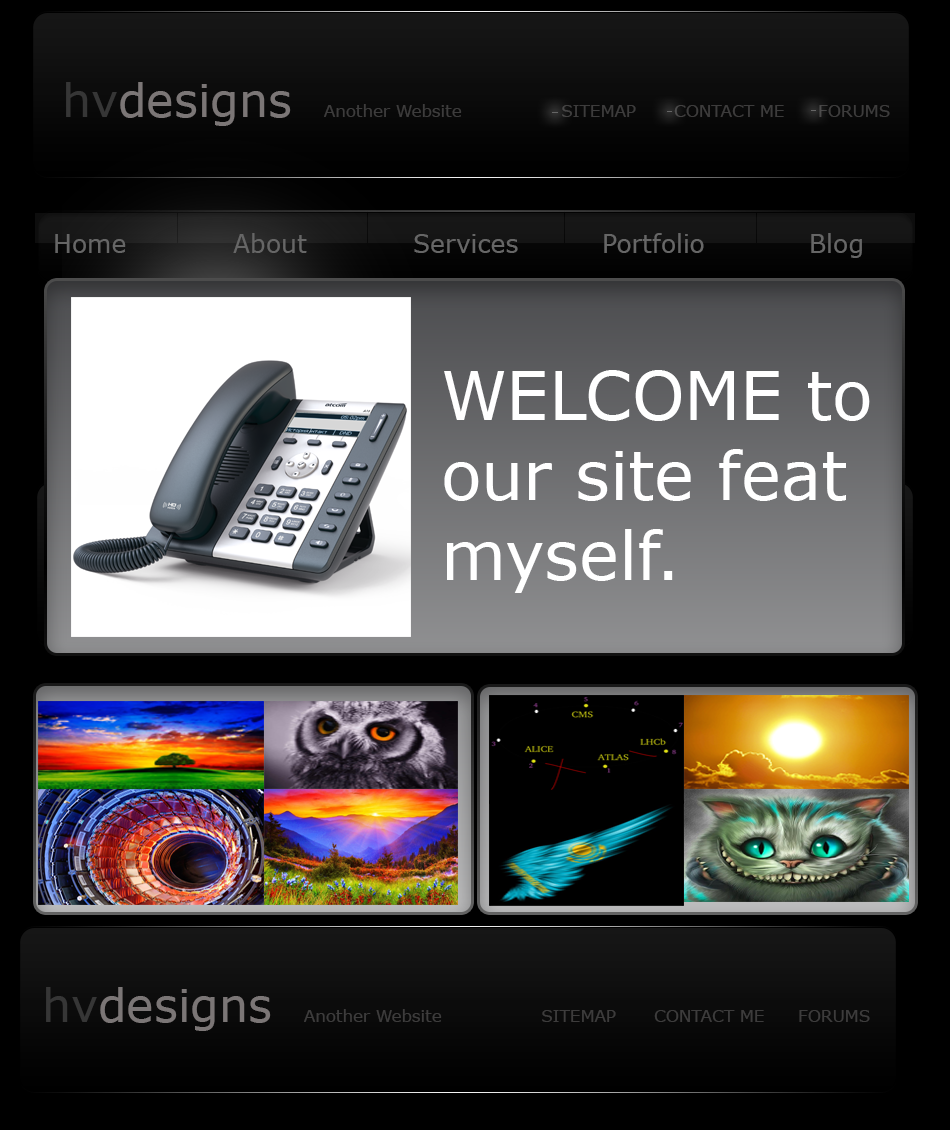
<style>
.page{position:relative;width:950px;height:1130px}
.page>*{position:absolute;margin:0}
.t1{font:16.7px "Verdana";color:#3d3c3c}
.t2{font:45.8px "Verdana";color:#363636}
.t3{font:45.8px "Verdana";color:#7b7676}
.t4{font:25px "Verdana";color:#666666}
.t5{font:66.7px "Verdana";color:#ffffff}
</style>
<div class="page">
<p class="t1" style="left:66px;top:82px;width:824px;height:44px"><span class="t2">hv</span><span class="t3">designs  </span>Another Website                 SITEMAP  CONTACT ME  FORUMS</p>
<p class="t4" style="left:55px;top:233px;width:807px;height:25px">Home   About   Services    Portfolio   Blog  Contact Me</p>
<p class="t5" style="left:444px;top:370px;width:426px;height:223px">WELCOME to our site feat myself.</p>
<p class="t1" style="left:46px;top:987px;width:824px;height:44px"><span class="t2">hv</span><span class="t3">designs  </span>Another Website                 SITEMAP  CONTACT ME  FORUMS</p>
</div>
